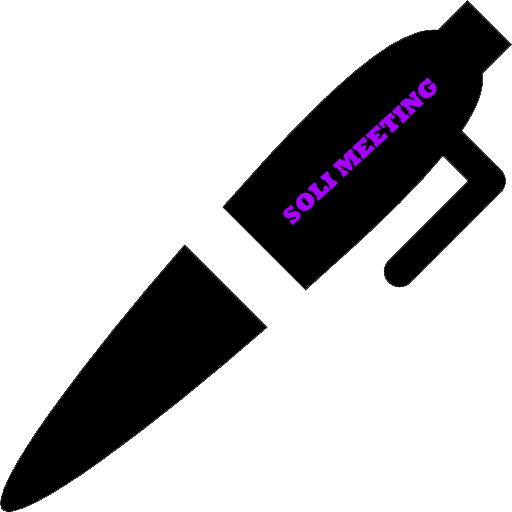
<style>
.page{position:relative;width:512px;height:512px;background:#ffffff}
.page>*{position:absolute;margin:0}
.t1{font:24px "Rockwell-ExtraBold";color:#a600ff}
</style>
<div class="page">
<p class="t1" style="left:283px;top:77px;width:154px;height:149px;rotate:-43deg">SOLI MEETING</p>
</div>
